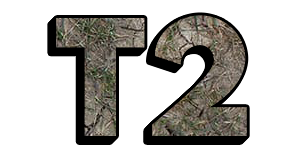
<style>
.page{position:relative;width:285px;height:148px;background:#ffffff}
.page>*{position:absolute;margin:0}
.t1{font:150px "LEMONMILK-Bold"}
</style>
<div class="page">
<p class="t1" style="left:54px;top:17px;width:191px;height:121px">T2</p>
<p class="t1" style="left:55px;top:16px;width:191px;height:121px">T2</p>
<p class="t1" style="left:56px;top:15px;width:191px;height:121px">T2</p>
<p class="t1" style="left:50px;top:21px;width:191px;height:121px">T2</p>
<p class="t1" style="left:51px;top:20px;width:191px;height:121px">T2</p>
<p class="t1" style="left:52px;top:19px;width:191px;height:121px">T2</p>
<p class="t1" style="left:53px;top:18px;width:191px;height:121px">T2</p>
</div>
